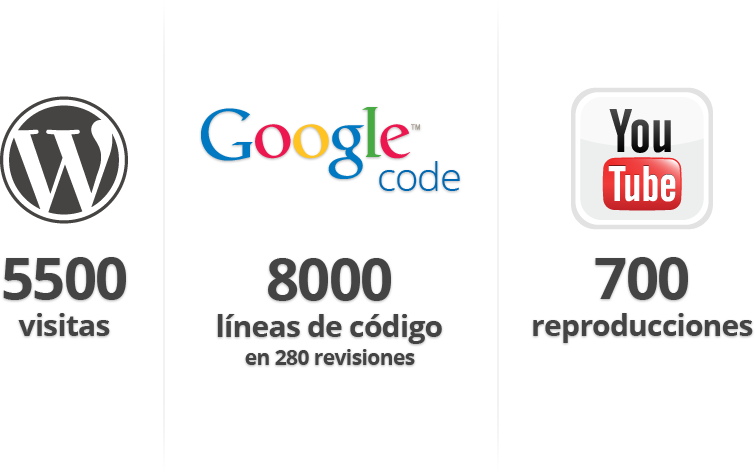
<style>
.page{position:relative;width:755px;height:473px;background:#ffffff}
.page>*{position:absolute;margin:0}
.t1{font:40px "OpenSans-Light";letter-spacing:-0.025em;color:#0068b3}
.t2{font:30px/37px "OpenSans-Bold";letter-spacing:-0.025em;color:#444444}
.t3{font:57.7px/37px "OpenSans-Bold";letter-spacing:-0.025em;color:#444444}
.t4{font:20.9px "OpenSans-Bold";letter-spacing:-0.025em;color:#444444}
</style>
<div class="page">
<p class="t1" style="left:379px;top:161px;width:81px;height:30px">code</p>
<p class="t2" style="left:3px;top:257px;width:123px;height:79px;text-align:center"><span class="t3">5500<br></span>visitas</p>
<p class="t2" style="left:533px;top:257px;width:220px;height:86px;text-align:center"><span class="t3">700<br></span>reproducciones</p>
<p class="t2" style="left:217px;top:258px;width:225px;height:86px;text-align:center"><span class="t3">8000<br></span>líneas de código</p>
<p class="t4" style="left:245px;top:349px;width:170px;height:16px">en 280 revisiones</p>
</div>
